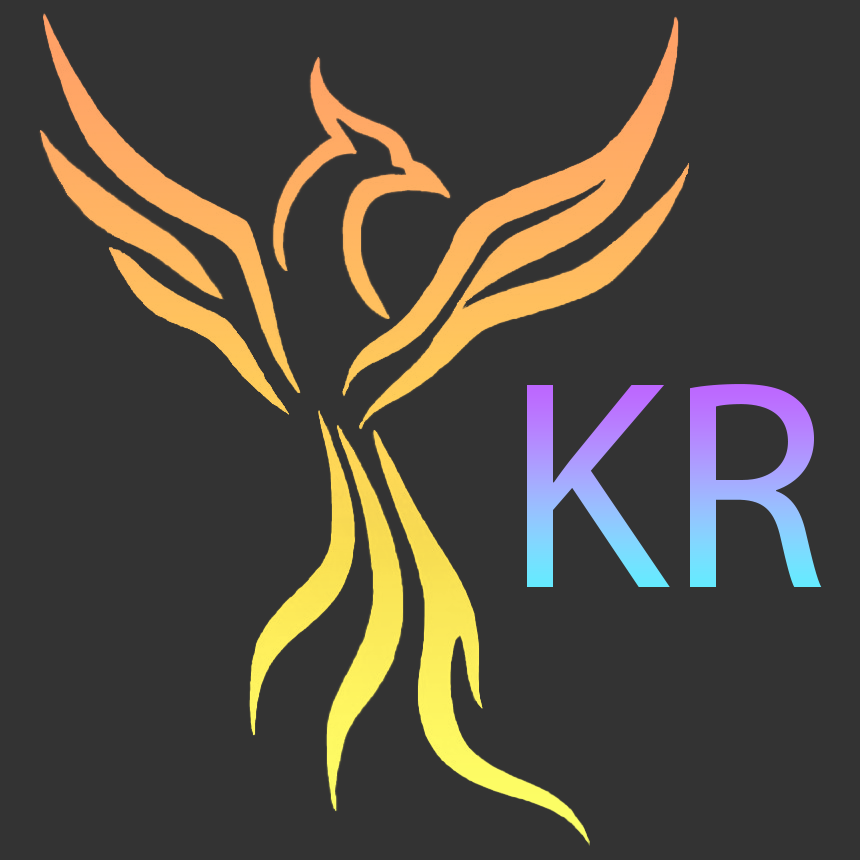
<style>
.page{position:relative;width:860px;height:860px;background:#333333}
.page>*{position:absolute;margin:0}
.t1{font:300px "MyriadPro-Regular"}
</style>
<div class="page">
<p class="t1" style="left:527px;top:384px;width:295px;height:203px">KR</p>
</div>
